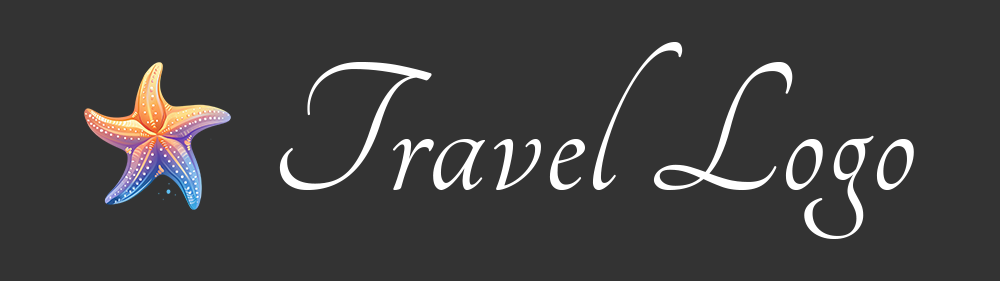
<style>
.page{position:relative;width:1000px;height:281px;background:#333333}
.page>*{position:absolute;margin:0}
.t1{font:199.3px "Tangerine-Regular";letter-spacing:0.01em;color:#ffffff}
</style>
<div class="page">
<p class="t1" style="left:279px;top:42px;width:635px;height:197px">Travel Logo</p>
</div>
